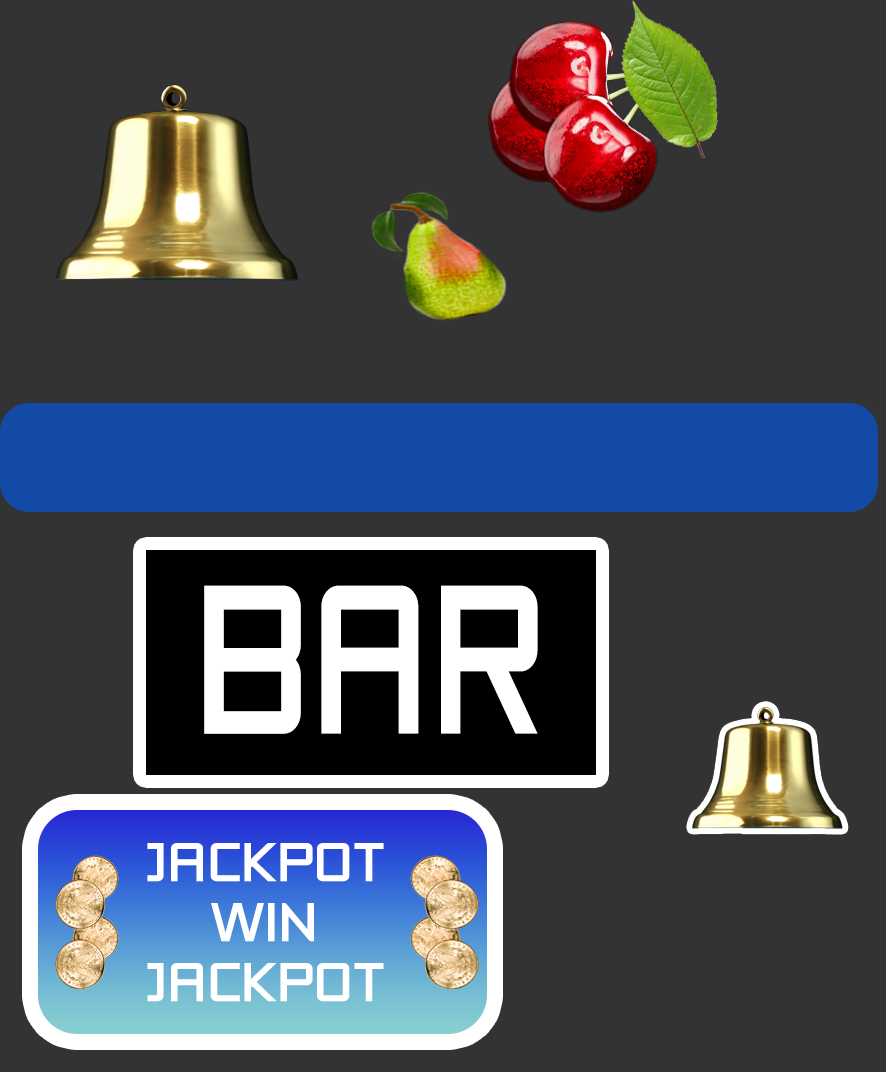
<style>
.page{position:relative;width:886px;height:1072px;background:#333333}
.page>*{position:absolute;margin:0}
.t1{font:47.5px "SafetyMedium";letter-spacing:0.01em;color:#ffffff;scale:1.05 1}
</style>
<div class="page">
<p class="t1" style="left:147px;top:843px;width:237px;height:159px;text-align:center">JACKPOT<br>WIN<br>JACKPOT</p>
</div>
